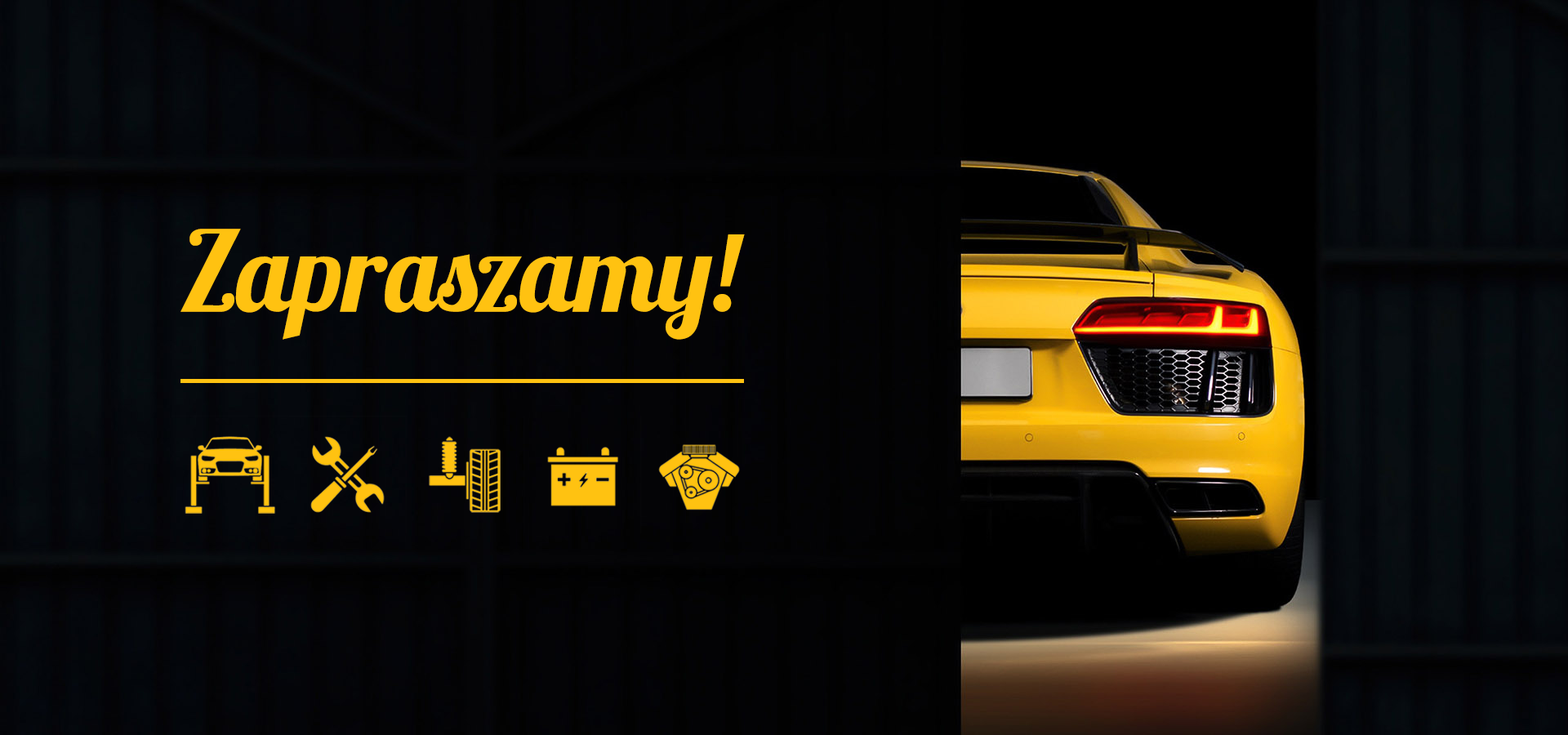
<style>
.page{position:relative;width:1568px;height:735px}
.page>*{position:absolute;margin:0}
.t1{font:110.2px "Lobster1.3";color:#ffc211}
</style>
<div class="page">
<p class="t1" style="left:180px;top:229px;width:565px;height:111px">Zapraszamy!</p>
</div>
